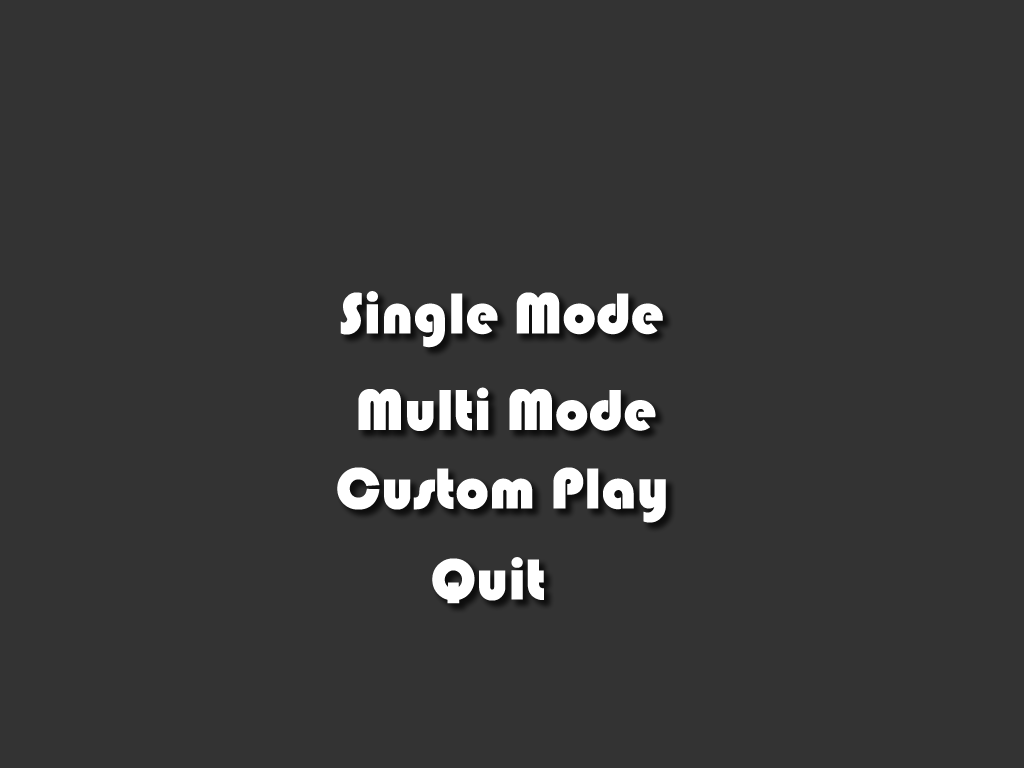
<style>
.page{position:relative;width:1024px;height:768px;background:#333333}
.page>*{position:absolute;margin:0}
.t1{font:60px "Bauhaus93";color:#ffffff}
</style>
<div class="page">
<p class="t1" style="left:340px;top:291px;width:323px;height:57px">Single Mode</p>
<p class="t1" style="left:358px;top:387px;width:298px;height:44px">Multi Mode</p>
<p class="t1" style="left:337px;top:467px;width:329px;height:56px">Custom Play</p>
<p class="t1" style="left:432px;top:557px;width:112px;height:47px">Quit</p>
</div>
